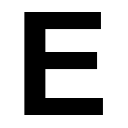
<style>
.page{position:relative;width:128px;height:128px;background:#ffffff}
.page>*{position:absolute;margin:0}
.t1{font:144px "Arial-BoldMT";color:#000000}
</style>
<div class="page">
<p class="t1" style="left:24px;top:12px;width:79px;height:103px">E</p>
</div>
